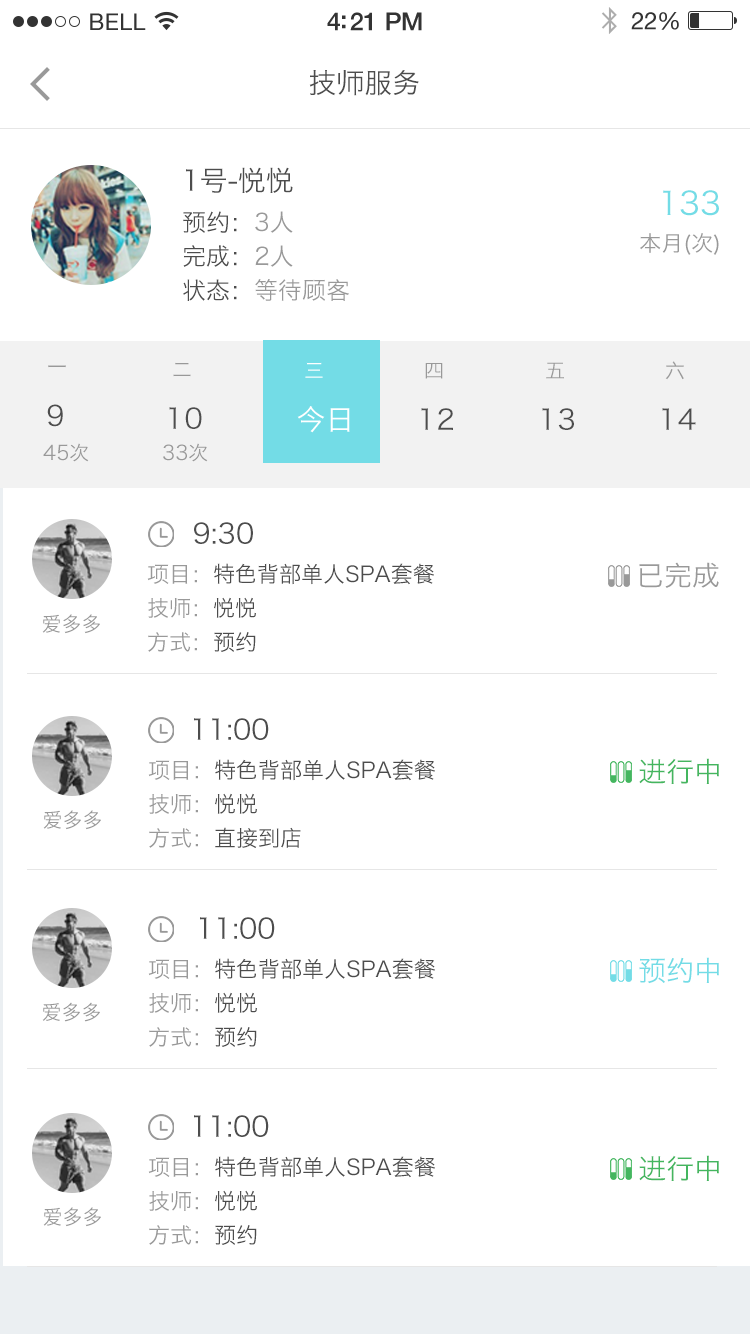
<style>
.page{position:relative;width:750px;height:1334px;background:#ffffff}
.page>*{position:absolute;margin:0}
.t1{font:28px "HiraginoSansGB-W3";color:#4d4d4d}
.t2{font:22px/36px "HiraginoSansGB-W3";color:#999999}
.t3{font:32px/36px "HiraginoSansGB-W3";color:#73dce6}
.t4{font:24px/34px "HiraginoSansGB-W3";color:#999999}
.t5{font:24px/34px "HiraginoSansGB-W3";color:#4c4c4c}
.t6{font:20px "HiraginoSansGB-W3";letter-spacing:0.03em;color:#999999}
.t7{font:20px "HiraginoSansGB-W3";letter-spacing:0.03em;color:#ffffff}
.t8{font:28px "HiraginoSansGB-W3";letter-spacing:0.03em;color:#4d4d4d}
.t9{font:28px "HiraginoSansGB-W3";letter-spacing:0.03em;color:#ffffff}
.t10{font:20px "HiraginoSansGB-W3";color:#999999}
.t11{font:22px "HiraginoSansGB-W3";color:#4c4c4c}
.t12{font:22px/34px "HiraginoSansGB-W3";color:#999999}
.t13{font:22px/34px "HiraginoSansGB-W3";color:#4c4c4c}
.t14{font:28px "HiraginoSansGB-W3";color:#999999}
.t15{font:28px "HiraginoSansGB-W3";color:#44b65f}
.t16{font:28px "HiraginoSansGB-W3";color:#73dce6}
</style>
<div class="page">
<p class="t1" style="left:309px;top:70px;width:110px;height:26px">技师服务</p>
<p class="t1" style="left:186px;top:167px;width:107px;height:26px">1号-悦悦</p>
<p class="t2" style="left:640px;top:190px;width:79px;height:65px;text-align:right"><span class="t3">133<br></span>本月(次)</p>
<p class="t4" style="left:183px;top:211px;width:166px;height:90px;text-align:justify"><span class="t5">预约：</span>3人<br><span class="t5">完成：</span>2人<br><span class="t5">状态：</span>等待顾客</p>
<p class="t6" style="left:48px;top:365px;width:18px;height:3px">一</p>
<p class="t6" style="left:173px;top:362px;width:18px;height:15px">二</p>
<p class="t7" style="left:305px;top:362px;width:18px;height:16px">三</p>
<p class="t6" style="left:425px;top:363px;width:18px;height:16px">四</p>
<p class="t6" style="left:546px;top:362px;width:18px;height:17px">五</p>
<p class="t6" style="left:665px;top:361px;width:19px;height:19px">六</p>
<p class="t8" style="left:47px;top:404px;width:16px;height:23px">9</p>
<p class="t8" style="left:169px;top:407px;width:33px;height:22px">10</p>
<p class="t9" style="left:297px;top:406px;width:53px;height:27px">今日</p>
<p class="t8" style="left:421px;top:408px;width:32px;height:22px">12</p>
<p class="t8" style="left:542px;top:408px;width:32px;height:22px">13</p>
<p class="t8" style="left:662px;top:408px;width:34px;height:22px">14</p>
<p class="t10" style="left:43px;top:443px;width:46px;height:19px">45次</p>
<p class="t10" style="left:163px;top:443px;width:45px;height:19px">33次</p>
<p class="t1" style="left:194px;top:522px;width:59px;height:22px">9:30</p>
<p class="t11" style="left:147px;top:563px;width:287px;height:89px;text-align:justify"><span class="t12">项目：</span>特色背部单人SPA套餐<br><span class="t12">技师：</span><span class="t13">悦悦<br></span><span class="t12">方式：</span><span class="t13">预约</span></p>
<p class="t14" style="left:639px;top:562px;width:80px;height:26px">已完成</p>
<p class="t10" style="left:42px;top:614px;width:58px;height:20px">爱多多</p>
<p class="t1" style="left:194px;top:718px;width:75px;height:22px">11:00</p>
<p class="t11" style="left:148px;top:759px;width:287px;height:89px;text-align:justify"><span class="t12">项目：</span>特色背部单人SPA套餐<br><span class="t12">技师：</span><span class="t13">悦悦<br></span><span class="t12">方式：</span><span class="t13">直接到店</span></p>
<p class="t15" style="left:639px;top:758px;width:80px;height:26px">进行中</p>
<p class="t10" style="left:43px;top:810px;width:58px;height:20px">爱多多</p>
<p class="t1" style="left:200px;top:917px;width:75px;height:22px">11:00</p>
<p class="t11" style="left:148px;top:958px;width:287px;height:89px;text-align:justify"><span class="t12">项目：</span>特色背部单人SPA套餐<br><span class="t12">技师：</span><span class="t13">悦悦<br></span><span class="t12">方式：</span><span class="t13">预约</span></p>
<p class="t16" style="left:639px;top:957px;width:80px;height:27px">预约中</p>
<p class="t10" style="left:42px;top:1002px;width:58px;height:20px">爱多多</p>
<p class="t1" style="left:194px;top:1115px;width:75px;height:22px">11:00</p>
<p class="t11" style="left:148px;top:1156px;width:287px;height:89px;text-align:justify"><span class="t12">项目：</span>特色背部单人SPA套餐<br><span class="t12">技师：</span><span class="t13">悦悦<br></span><span class="t12">方式：</span><span class="t13">预约</span></p>
<p class="t15" style="left:639px;top:1155px;width:80px;height:26px">进行中</p>
<p class="t10" style="left:43px;top:1207px;width:58px;height:20px">爱多多</p>
</div>
